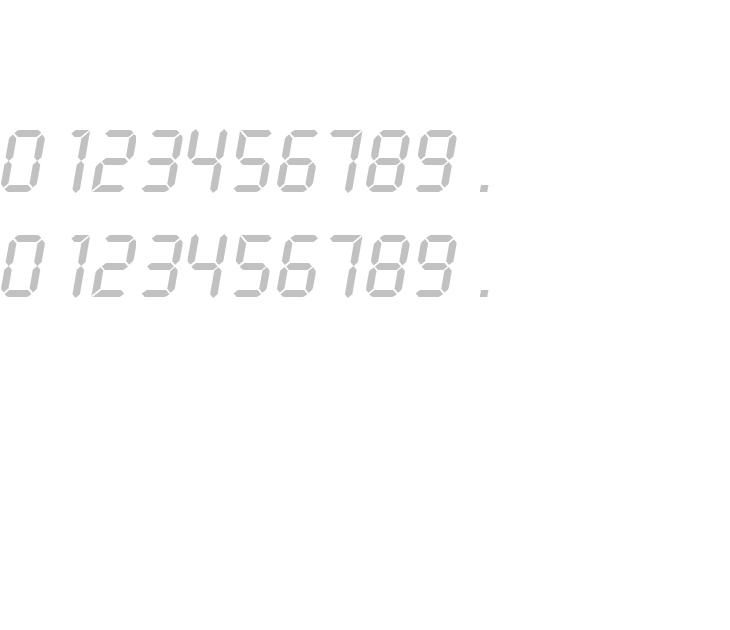
<style>
.page{position:relative;width:730px;height:630px;background:#ffffff}
.page>*{position:absolute;margin:0}
.t1{font:93.3px "LCDReg";color:#c1c1c1}
</style>
<div class="page">
<p class="t1" style="left:1px;top:130px;width:44px;height:62px">0</p>
<p class="t1" style="left:71px;top:130px;width:19px;height:63px">1</p>
<p class="t1" style="left:141px;top:130px;width:42px;height:62px">3</p>
<p class="t1" style="left:187px;top:129px;width:41px;height:64px">4</p>
<p class="t1" style="left:233px;top:130px;width:39px;height:62px">5</p>
<p class="t1" style="left:277px;top:130px;width:41px;height:62px">6</p>
<p class="t1" style="left:330px;top:130px;width:33px;height:63px">7</p>
<p class="t1" style="left:366px;top:130px;width:44px;height:62px">8</p>
<p class="t1" style="left:415px;top:130px;width:42px;height:62px">9</p>
<p class="t1" style="left:479px;top:185px;width:10px;height:7px">.</p>
<p class="t1" style="left:1px;top:235px;width:44px;height:62px">0</p>
<p class="t1" style="left:71px;top:235px;width:19px;height:63px">1</p>
<p class="t1" style="left:141px;top:235px;width:42px;height:62px">3</p>
<p class="t1" style="left:187px;top:234px;width:41px;height:64px">4</p>
<p class="t1" style="left:233px;top:235px;width:39px;height:62px">5</p>
<p class="t1" style="left:277px;top:235px;width:41px;height:62px">6</p>
<p class="t1" style="left:330px;top:235px;width:33px;height:63px">7</p>
<p class="t1" style="left:366px;top:235px;width:44px;height:62px">8</p>
<p class="t1" style="left:415px;top:235px;width:42px;height:62px">9</p>
<p class="t1" style="left:479px;top:290px;width:10px;height:7px">.</p>
</div>
